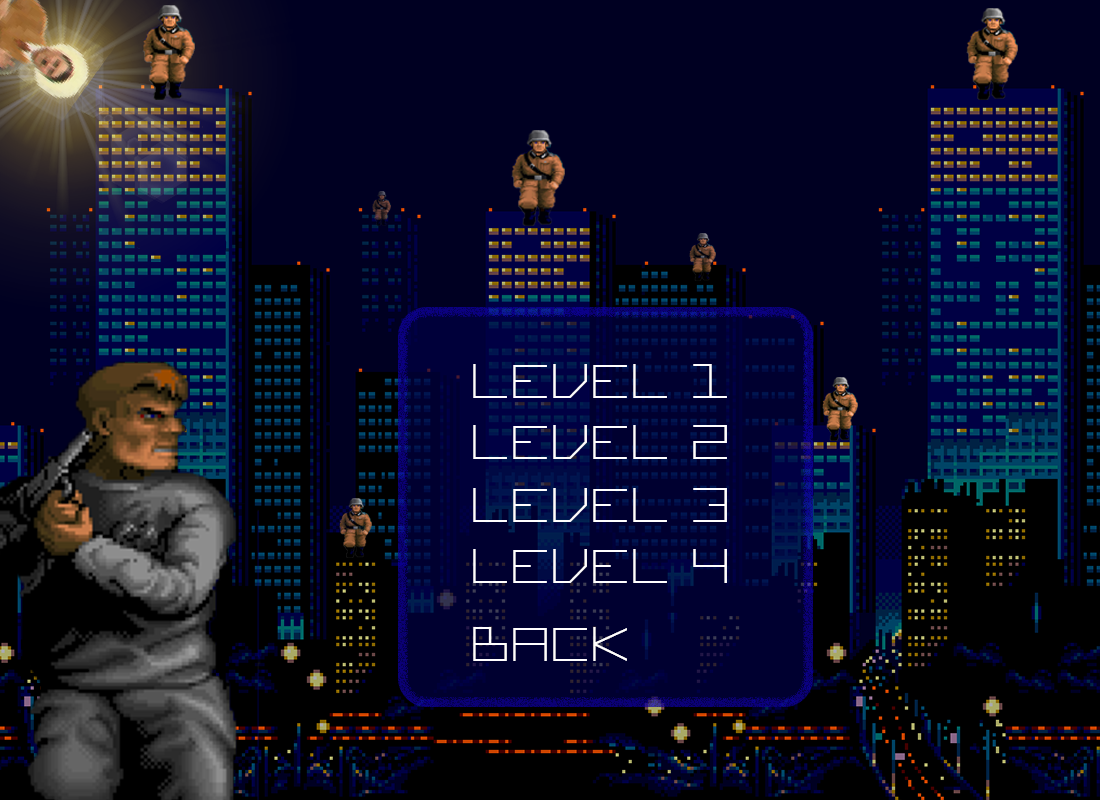
<style>
.page{position:relative;width:1100px;height:800px;background:#000022}
.page>*{position:absolute;margin:0}
.t1{font:66.7px "ReSquare-Regular";color:#fffefe}
</style>
<div class="page">
<p class="t1" style="left:473px;top:364px;width:254px;height:34px">level 1</p>
<p class="t1" style="left:473px;top:425px;width:254px;height:34px">level 2</p>
<p class="t1" style="left:473px;top:488px;width:254px;height:34px">level 3</p>
<p class="t1" style="left:473px;top:549px;width:254px;height:34px">level 4</p>
<p class="t1" style="left:473px;top:627px;width:154px;height:34px">back</p>
</div>
